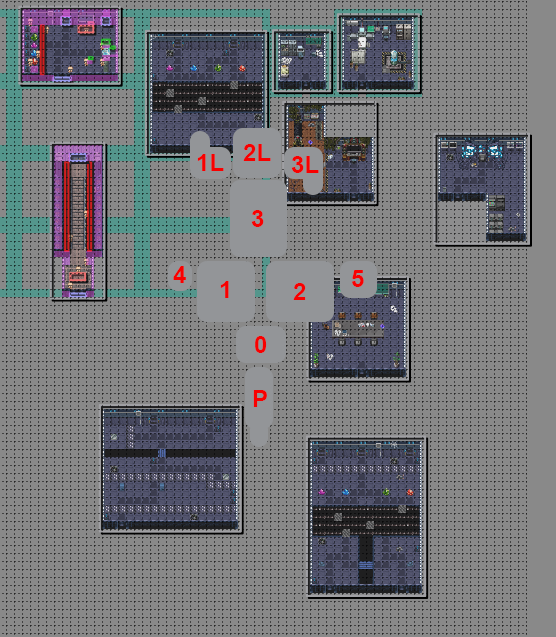
<style>
.page{position:relative;width:556px;height:637px;background:#898989}
.page>*{position:absolute;margin:0}
.t1{font:12px "Arial-BoldMT";color:#f80000}
</style>
<div class="page">
<p class="t1" style="left:243px;top:144px;width:28px;height:17px">2L</p>
<p class="t1" style="left:197px;top:154px;width:27px;height:17px">1L</p>
<p class="t1" style="left:291px;top:156px;width:28px;height:17px">3L</p>
<p class="t1" style="left:251px;top:210px;width:13px;height:17px">3</p>
<p class="t1" style="left:173px;top:266px;width:13px;height:17px">4</p>
<p class="t1" style="left:352px;top:270px;width:12px;height:17px">5</p>
<p class="t1" style="left:220px;top:281px;width:9px;height:17px">1</p>
<p class="t1" style="left:293px;top:283px;width:13px;height:17px">2</p>
<p class="t1" style="left:255px;top:336px;width:12px;height:17px">0</p>
<p class="t1" style="left:253px;top:390px;width:14px;height:17px">P</p>
</div>
